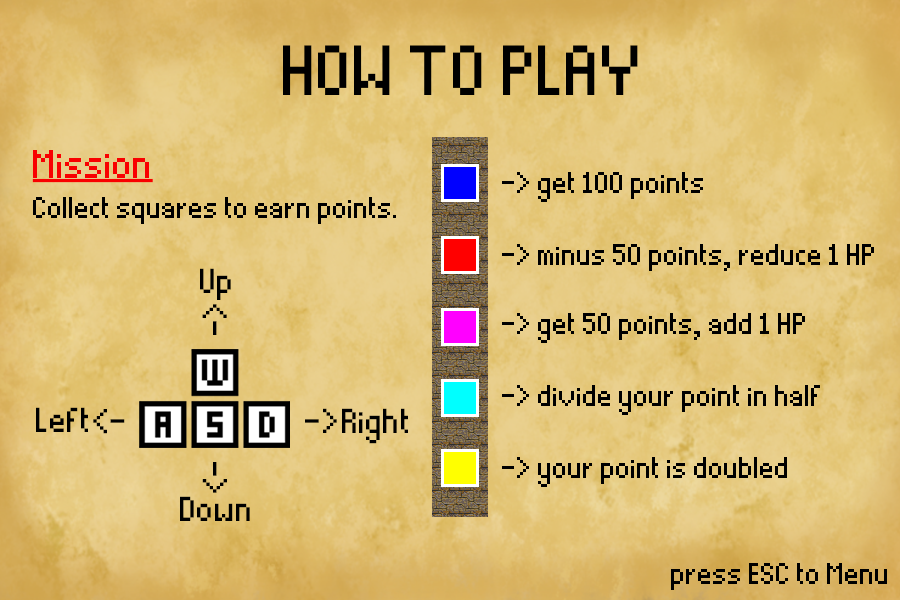
<style>
.page{position:relative;width:900px;height:600px}
.page>*{position:absolute;margin:0}
.t1{font:113.3px "Thintel";color:#000000}
.t2{font:48px/40px "Thintel";color:#000000}
.t3{font:64px/40px "Thintel";color:#f90000;text-decoration:underline}
.t4{font:48px "Thintel";color:#000000}
.t5{font:55.3px "Thintel";color:#000000}
</style>
<div class="page">
<p class="t1" style="left:283px;top:45px;width:355px;height:50px">HOW TO PLAY</p>
<p class="t2" style="left:32px;top:150px;width:364px;height:74px"><span class="t3">Mission<br></span>Collect squares to earn points.</p>
<p class="t4" style="left:502px;top:172px;width:201px;height:30px">-&gt; get 100 points</p>
<p class="t4" style="left:502px;top:244px;width:372px;height:27px">-&gt; minus 50 points, reduce 1 HP</p>
<p class="t5" style="left:200px;top:268px;width:31px;height:32px">Up</p>
<p class="t5" style="left:202px;top:304px;width:25px;height:31px;rotate:-90deg">-&gt;</p>
<p class="t4" style="left:502px;top:313px;width:303px;height:30px">-&gt; get 50 points, add 1 HP</p>
<p class="t4" style="left:502px;top:385px;width:318px;height:30px">-&gt; divide your point in half</p>
<p class="t5" style="left:36px;top:407px;width:52px;height:25px">Left</p>
<p class="t5" style="left:93px;top:409px;width:32px;height:25px;rotate:180deg">-&gt;</p>
<p class="t5" style="left:305px;top:408px;width:32px;height:25px">-&gt;</p>
<p class="t5" style="left:342px;top:408px;width:66px;height:36px">Right</p>
<p class="t5" style="left:202px;top:462px;width:25px;height:31px;rotate:90deg">-&gt;</p>
<p class="t4" style="left:502px;top:457px;width:285px;height:30px">-&gt; your point is doubled</p>
<p class="t5" style="left:180px;top:496px;width:70px;height:25px">Down</p>
<p class="t4" style="left:671px;top:563px;width:216px;height:27px">press ESC to Menu</p>
</div>
